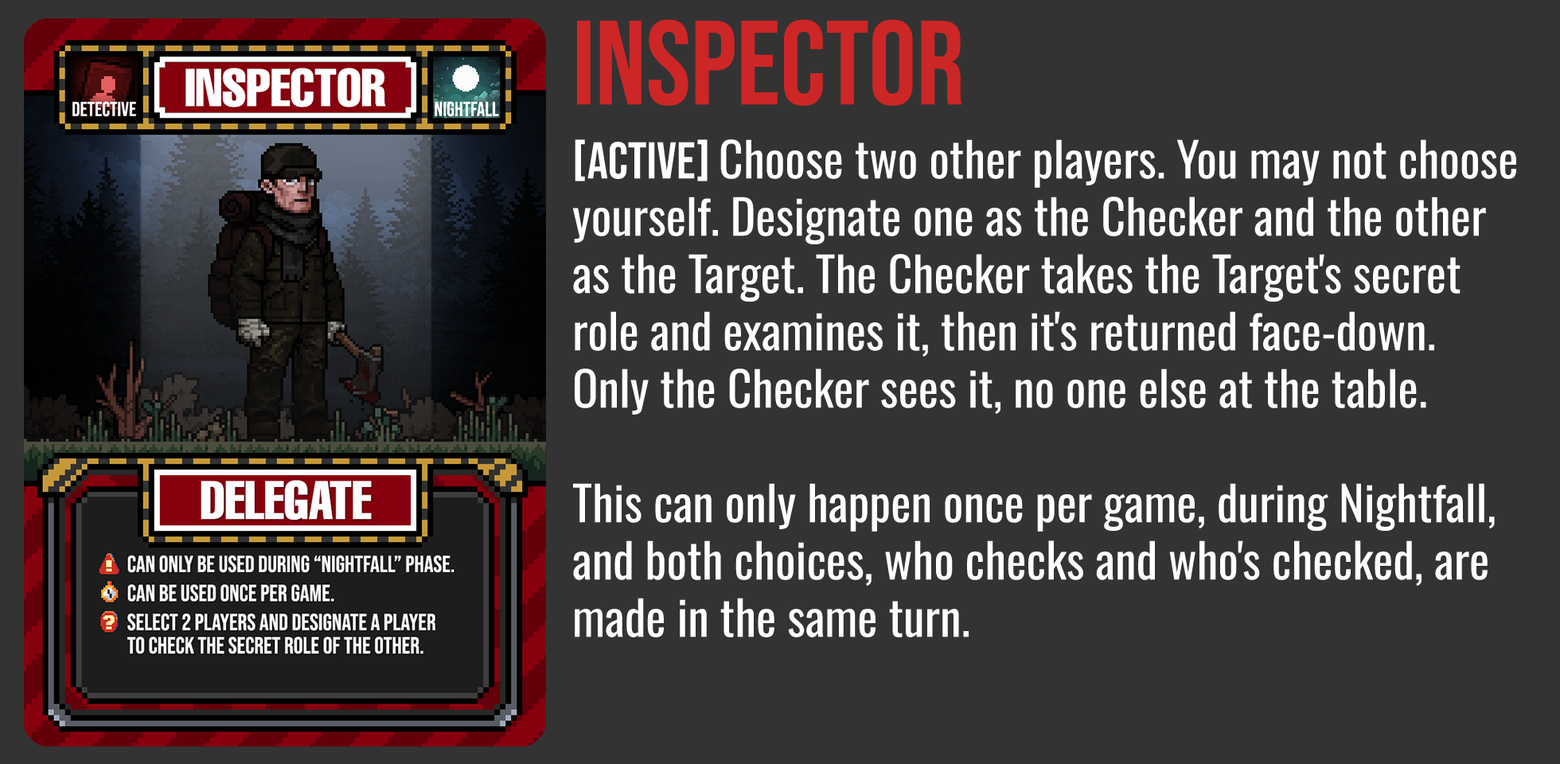
<style>
.page{position:relative;width:1560px;height:764px;background:#333333}
.page>*{position:absolute;margin:0}
.t1{font:119.4px "BebasNeue-Regular";color:#cd2626}
.t2{font:47.8px "Oswald-Regular";color:#ffffff}
.t3{font:51.7px "BebasNeue-Regular";color:#ffffff}
</style>
<div class="page">
<p class="t1" style="left:577px;top:19px;width:385px;height:87px">INSPECTOR</p>
<p class="t2" style="left:572px;top:139px;width:945px;height:499px"><span class="t3">[aCTIVE] </span>Choose two other players. You may not choose yourself. Designate one as the Checker and the other as the Target. The Checker takes the Target's secret role and examines it, then it's returned face-down. Only the Checker sees it, no one else at the table. <br><br>This can only happen once per game, during Nightfall, and both choices, who checks and who's checked, are made in the same turn.</p>
</div>
